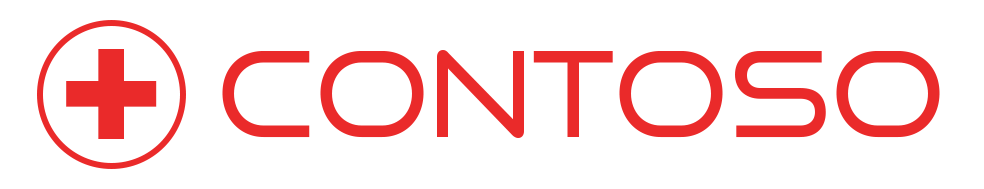
<style>
.page{position:relative;width:984px;height:189px;background:#ffffff}
.page>*{position:absolute;margin:0}
.t1{font:165.4px "Hotel-Black";color:#ea2a2a}
.t2{font:118.1px "GoodTimesBk-Regular";color:#ea2a2a}
</style>
<div class="page">
<p class="t1" style="left:66px;top:49px;width:91px;height:90px">+</p>
<p class="t2" style="left:222px;top:50px;width:718px;height:88px">CONTOSO</p>
</div>
